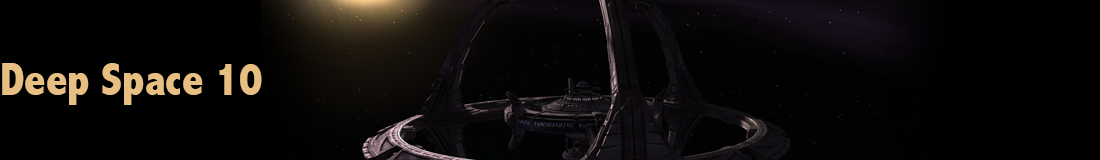
<style>
.page{position:relative;width:1100px;height:160px;background:#000000}
.page>*{position:absolute;margin:0}
.t1{font:47.1px "AbadiMT-CondensedExtraBold";color:#e8bf83}
</style>
<div class="page">
<p class="t1" style="left:2px;top:63px;width:260px;height:42px">Deep Space 10</p>
</div>
